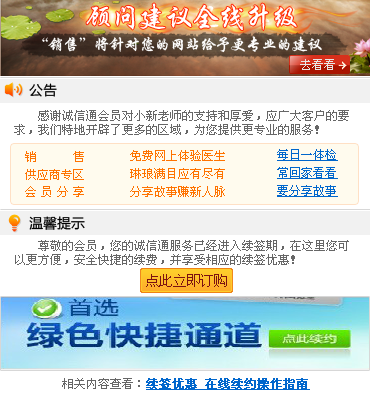
<style>
.page{position:relative;width:370px;height:400px;background:#ffffff}
.page>*{position:absolute;margin:0}
.t1{font:28px "FZXKJW--GB1-0";letter-spacing:-0.05em;color:#ffffff}
.t2{font:16px "FZXKJW--GB1-0";letter-spacing:-0.05em;color:#ffffff}
.t3{font:12px "SimSun";color:#e7e7e7}
.t4{font:14px "FZLTHK--GBK1-0";color:#000000}
.t5{font:12px "SimSun";color:#666666}
.t6{font:12px/18px "SimSun";color:#ff7300}
.t7{font:12px/18px "SimSun";color:#0066cc;text-decoration:underline}
.t8{font:12px "SimSun";color:#ff7300}
.t9{font:14px "SimSun";color:#7b1111}
.t10{font:12px "SimSun";color:#0066cc;font-weight:bold;text-decoration:underline}
</style>
<div class="page">
<p class="t1" style="left:86px;top:3px;width:209px;height:27px">顾问建议退隐江湖</p>
<p class="t1" style="left:86px;top:3px;width:211px;height:28px">顾问建议全线升级</p>
<p class="t2" style="left:42px;top:36px;width:280px;height:17px">“销售”将针对您的网站给予更专业的建议</p>
<p class="t3" style="left:300px;top:59px;width:35px;height:11px">去看看</p>
<p class="t4" style="left:29px;top:83px;width:28px;height:14px">公告</p>
<p class="t5" style="left:14px;top:110px;width:335px;height:25px">感谢诚信通会员对小新老师的支持和厚爱，应广大客户的要求，我们特地开辟了更多的区域，为您提供更专业的服务！</p>
<p class="t6" style="left:130px;top:150px;width:95px;height:47px">免费网上体验医生<br>琳琅满目应有尽有<br>分享故事赚新人脉</p>
<p class="t7" style="left:277px;top:149px;width:61px;height:48px">每日一体检<br>常回家看看<br>要分享故事</p>
<p class="t6" style="left:25px;top:151px;width:59px;height:29px">销      售<br>供应商专区</p>
<p class="t8" style="left:25px;top:186px;width:11px;height:11px">会</p>
<p class="t8" style="left:41px;top:186px;width:10px;height:11px">员</p>
<p class="t8" style="left:57px;top:186px;width:11px;height:11px">分</p>
<p class="t8" style="left:73px;top:186px;width:11px;height:11px">享</p>
<p class="t4" style="left:29px;top:216px;width:56px;height:14px">温馨提示</p>
<p class="t5" style="left:15px;top:240px;width:334px;height:25px">尊敬的会员，您的诚信通服务已经进入续签期，在这里您可以更方便，安全快捷的续费，并享受相应的续签优惠！</p>
<p class="t9" style="left:146px;top:274px;width:81px;height:13px">点此立即订购</p>
<p class="t10" style="left:62px;top:378px;width:248px;height:12px"><span class="t5">相关内容查看：</span>续签优惠 在线续约操作指南</p>
</div>
